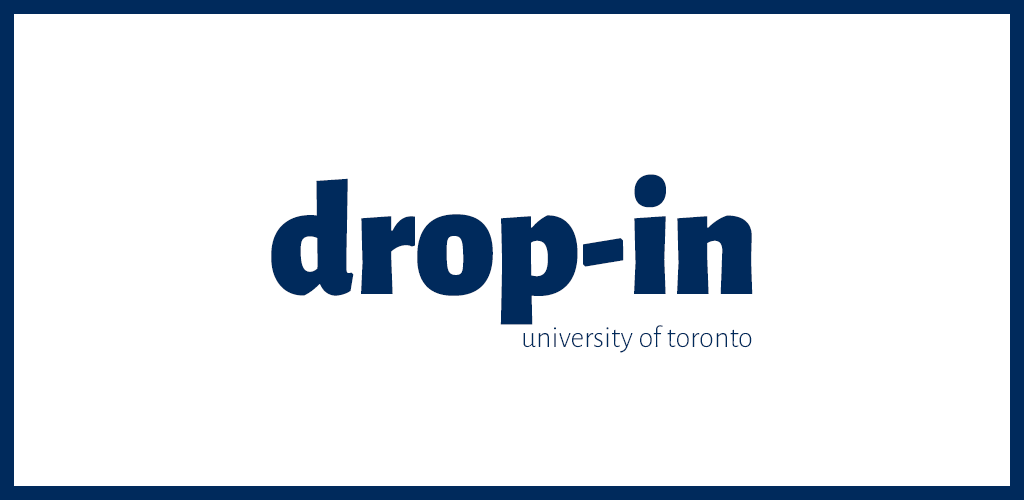
<style>
.page{position:relative;width:1024px;height:500px;background:#ffffff}
.page>*{position:absolute;margin:0}
.t1{font:164px "AlegreyaSans-Black";color:#002a5c}
.t2{font:30.8px "AlegreyaSans-Light";color:#002a5c}
</style>
<div class="page">
<p class="t1" style="left:271px;top:174px;width:482px;height:151px">drop-in</p>
<p class="t2" style="left:523px;top:325px;width:229px;height:28px">university of toronto</p>
</div>
